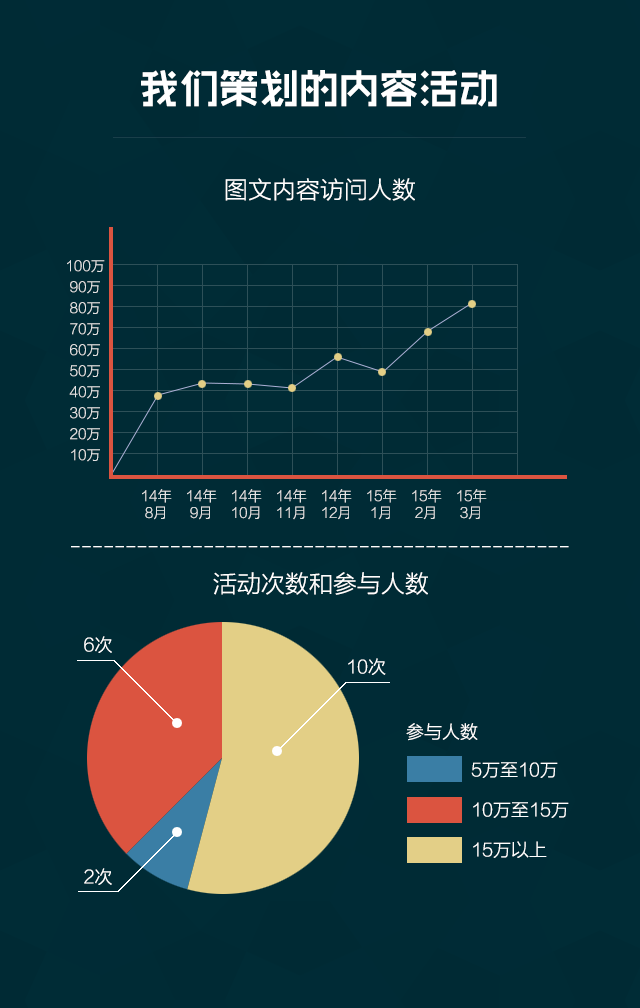
<style>
.page{position:relative;width:640px;height:1008px;background:#002b35}
.page>*{position:absolute;margin:0}
.t1{font:40px "RTWSShangGoG0v1-Bold";color:#ffffff}
.t2{font:24px "FZLTKHK--GBK1-0";color:#ffffff}
.t3{font:14px "FZLTKHK--GBK1-0";color:#e2e2e2}
.t4{font:18px "FZLTKHK--GBK1-0";color:#ffffff}
</style>
<div class="page">
<p class="t1" style="left:141px;top:70px;width:356px;height:37px">我们策划的内容活动</p>
<p class="t2" style="left:225px;top:178px;width:190px;height:23px">图文内容访问人数</p>
<p class="t3" style="left:67px;top:260px;width:38px;height:13px">100万</p>
<p class="t3" style="left:70px;top:281px;width:30px;height:13px">90万</p>
<p class="t3" style="left:70px;top:302px;width:30px;height:13px">80万</p>
<p class="t3" style="left:70px;top:323px;width:30px;height:13px">70万</p>
<p class="t3" style="left:70px;top:344px;width:30px;height:13px">60万</p>
<p class="t3" style="left:70px;top:365px;width:30px;height:13px">50万</p>
<p class="t3" style="left:69px;top:386px;width:31px;height:13px">40万</p>
<p class="t3" style="left:70px;top:407px;width:30px;height:13px">30万</p>
<p class="t3" style="left:70px;top:428px;width:30px;height:13px">20万</p>
<p class="t3" style="left:71px;top:449px;width:29px;height:13px">10万</p>
<p class="t3" style="left:142px;top:489px;width:30px;height:31px;text-align:center">14年<br>8月</p>
<p class="t3" style="left:187px;top:489px;width:30px;height:31px;text-align:center">14年<br>9月</p>
<p class="t3" style="left:232px;top:489px;width:30px;height:31px;text-align:center">14年<br>10月</p>
<p class="t3" style="left:277px;top:489px;width:30px;height:31px;text-align:center">14年<br>11月</p>
<p class="t3" style="left:322px;top:489px;width:30px;height:31px;text-align:center">14年<br>12月</p>
<p class="t3" style="left:367px;top:489px;width:30px;height:31px;text-align:center">15年<br>1月</p>
<p class="t3" style="left:412px;top:489px;width:30px;height:31px;text-align:center">15年<br>2月</p>
<p class="t3" style="left:457px;top:489px;width:30px;height:31px;text-align:center">15年<br>3月</p>
<p class="t4" style="left:71px;top:546px;width:498px;height:2px">---------------------------------------------</p>
<p class="t2" style="left:213px;top:572px;width:215px;height:23px">活动次数和参与人数</p>
<p class="t4" style="left:84px;top:636px;width:28px;height:17px">6次</p>
<p class="t4" style="left:348px;top:658px;width:38px;height:17px">10次</p>
<p class="t4" style="left:406px;top:723px;width:72px;height:18px">参与人数</p>
<p class="t4" style="left:471px;top:762px;width:87px;height:16px">5万至10万</p>
<p class="t4" style="left:473px;top:802px;width:96px;height:16px">10万至15万</p>
<p class="t4" style="left:473px;top:841px;width:74px;height:17px">15万以上</p>
<p class="t4" style="left:84px;top:868px;width:28px;height:17px">2次</p>
</div>
